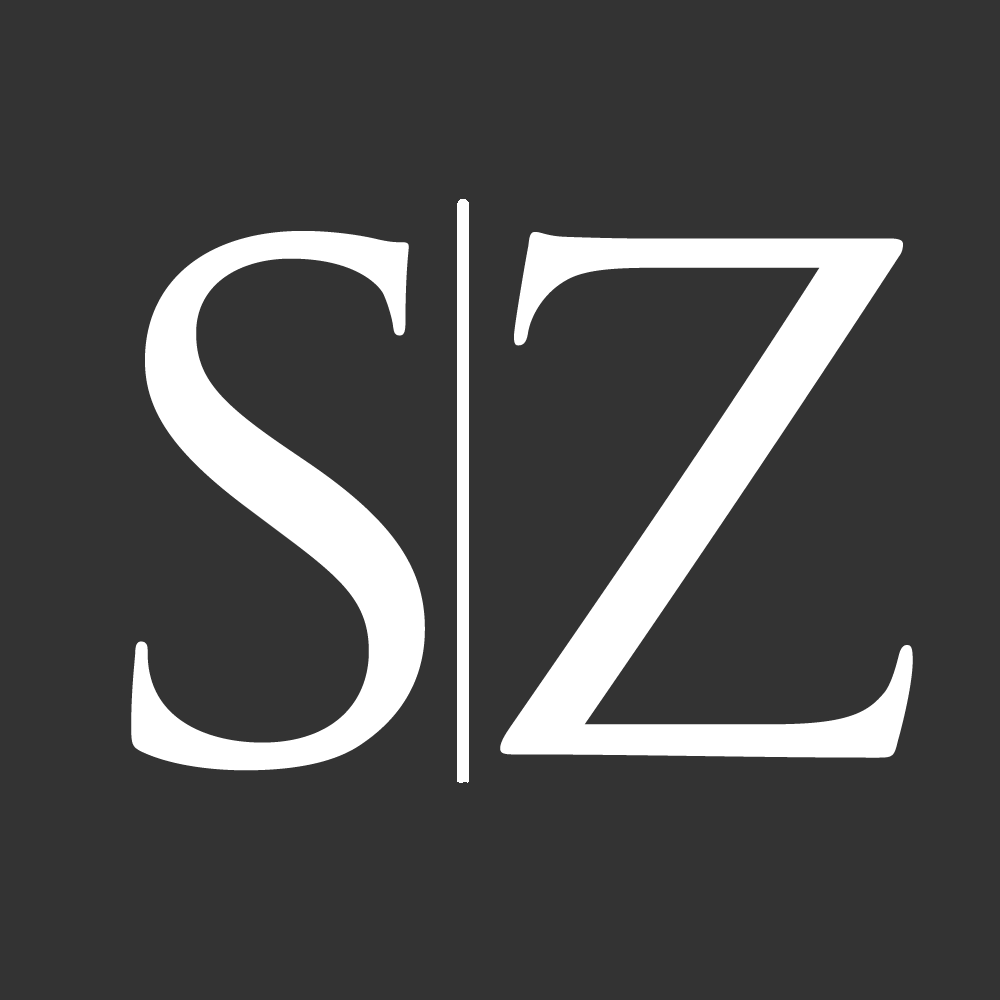
<style>
.page{position:relative;width:1000px;height:1000px;background:#333333}
.page>*{position:absolute;margin:0}
.t1{font:808.3px "TrajanPro-Regular";color:#ffffff}
</style>
<div class="page">
<p class="t1" style="left:131px;top:231px;width:294px;height:540px">s</p>
<p class="t1" style="left:500px;top:232px;width:413px;height:526px">z</p>
</div>
